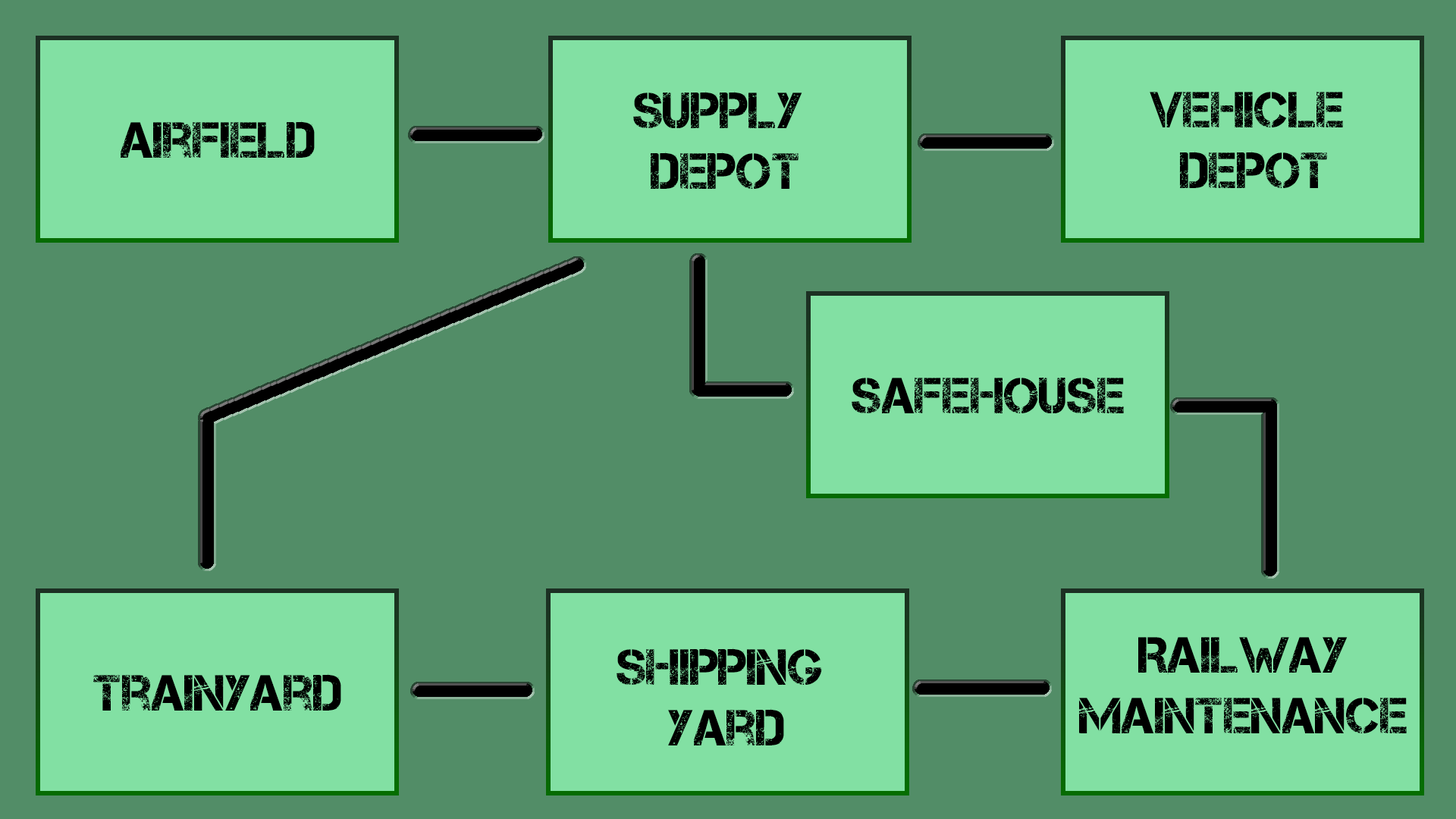
<style>
.page{position:relative;width:1456px;height:819px;background:#528d67}
.page>*{position:absolute;margin:0}
.t1{font:50.6px "Captureit";color:#000000}
</style>
<div class="page">
<p class="t1" style="left:633px;top:91px;width:169px;height:98px;text-align:center">Supply <br>Depot</p>
<p class="t1" style="left:1150px;top:92px;width:193px;height:96px;text-align:center">Vehicle<br> Depot</p>
<p class="t1" style="left:121px;top:121px;width:194px;height:37px">Airfield</p>
<p class="t1" style="left:852px;top:378px;width:272px;height:35px">Safehouse</p>
<p class="t1" style="left:1079px;top:637px;width:328px;height:96px;text-align:center">RailWay<br>maintenance</p>
<p class="t1" style="left:617px;top:648px;width:205px;height:97px;text-align:center">Shipping <br>Yard</p>
<p class="t1" style="left:93px;top:673px;width:248px;height:38px">Trainyard</p>
</div>
